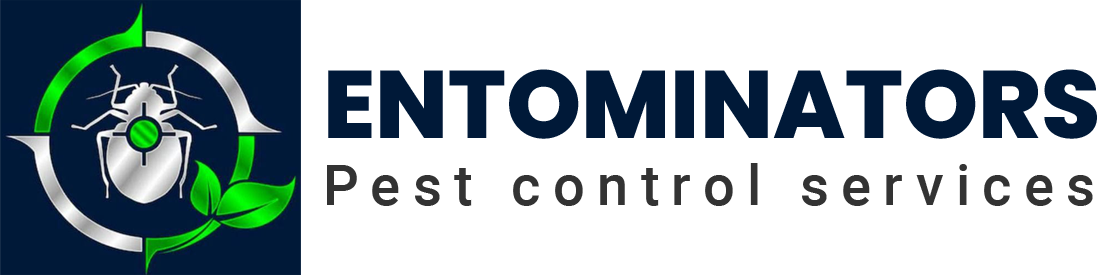
<style>
.page{position:relative;width:1108px;height:275px;background:#ffffff}
.page>*{position:absolute;margin:0}
.t1{font:56px "Roboto-Medium";letter-spacing:0.22em;color:#333333}
.t2{font:95.7px "Poppins-ExtraBold";color:#001938;text-transform:uppercase}
</style>
<div class="page">
<p class="t1" style="left:327px;top:69px;width:770px;height:137px"><span class="t2">Entominators<br></span>Pest control services</p>
</div>
